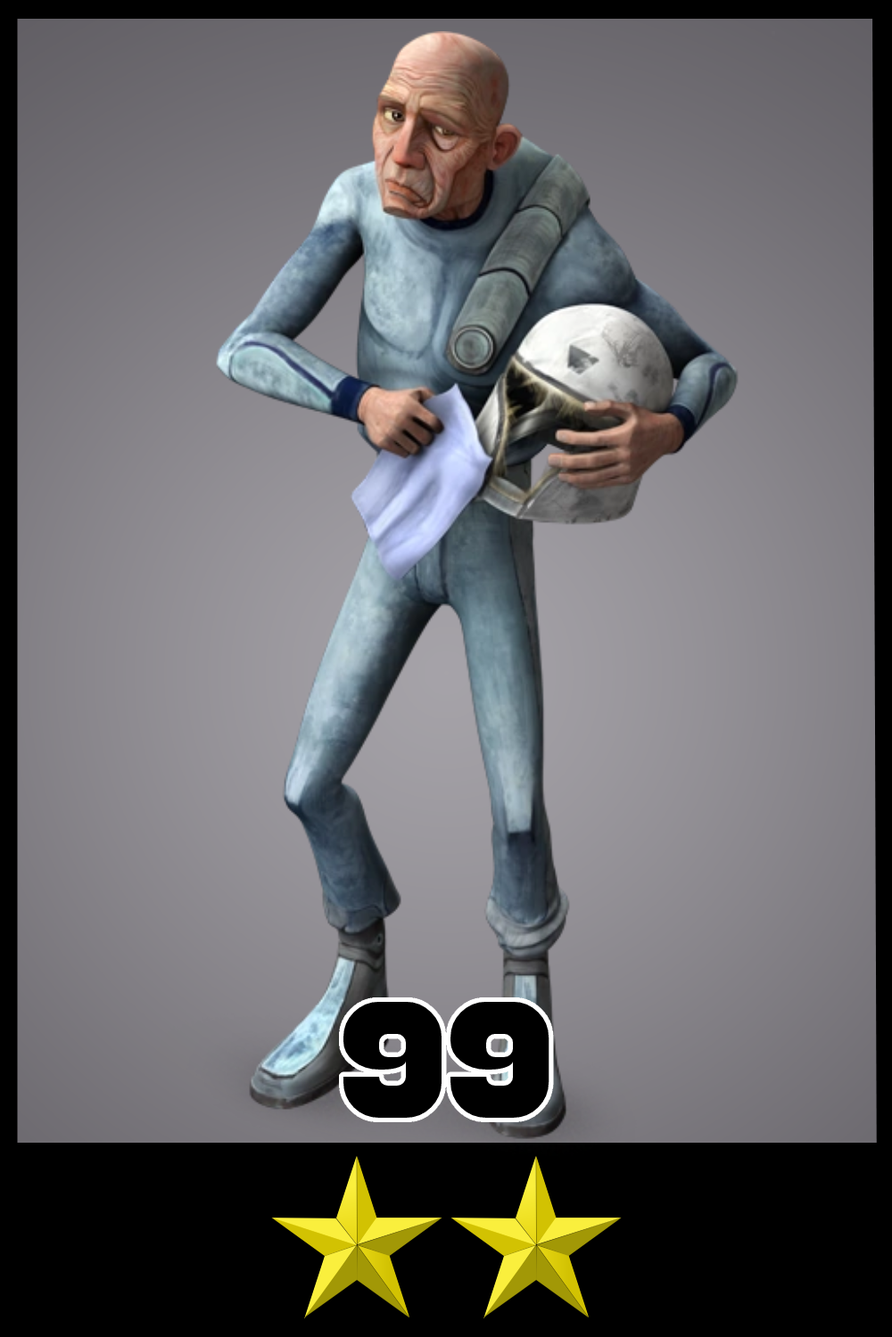
<style>
.page{position:relative;width:892px;height:1337px}
.page>*{position:absolute;margin:0}
.t1{font:178.5px "DistantGalaxy";color:#000000}
</style>
<div class="page">
<p class="t1" style="left:343px;top:1002px;width:206px;height:116px">99</p>
</div>
